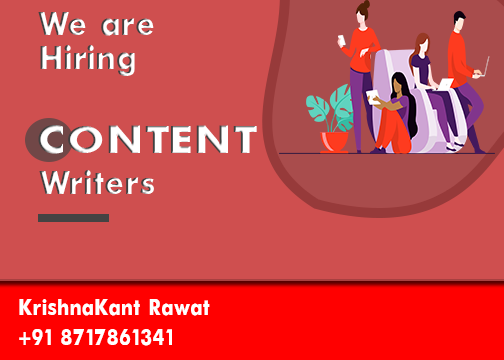
<style>
.page{position:relative;width:504px;height:360px;background:#cf4f4f}
.page>*{position:absolute;margin:0}
.t1{font:36px "Futura-Bold";scale:0.96 1}
.t2{font:43.1px "Futura-Bold";color:#ffffff;scale:1.16 1}
.t3{font:25.3px "Futura-Bold";color:#ffffff;scale:0.84 1}
</style>
<div class="page">
<p class="t1" style="left:38px;top:12px;width:116px;height:24px">We’’’’’’’ are</p>
<p class="t1" style="left:40px;top:45px;width:95px;height:31px">Hiring</p>
<p class="t2" style="left:38px;top:125px;width:219px;height:29px">CONTENT</p>
<p class="t1" style="left:39px;top:170px;width:115px;height:24px">Writers</p>
<p class="t3" style="left:19px;top:299px;width:191px;height:17px">KrishnaKant Rawat</p>
<p class="t3" style="left:19px;top:329px;width:153px;height:17px">+91 8717861341</p>
</div>
